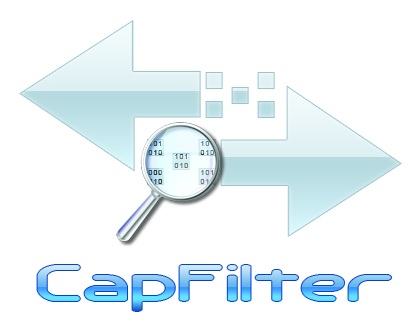
<style>
.page{position:relative;width:416px;height:326px;background:#ffffff}
.page>*{position:absolute;margin:0}
.t1{font:55px "AutomaticaBRK"}
</style>
<div class="page">
<p class="t1" style="left:36px;top:264px;width:356px;height:48px">CapFilter</p>
</div>
